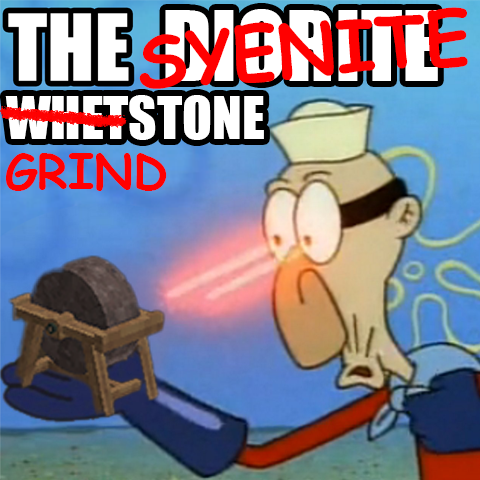
<style>
.page{position:relative;width:480px;height:480px}
.page>*{position:absolute;margin:0}
.t1{font:72px "ComicSansMS-Bold";color:#ff0000}
.t2{font:90px "Impact";color:#ffffff}
.t3{font:55px "Impact";color:#ffffff}
.t4{font:48px "ComicSansMS-Bold";color:#ff0000}
</style>
<div class="page">
<p class="t1" style="left:139px;top:7px;width:329px;height:82px;rotate:-4deg">SYENITE</p>
<p class="t2" style="left:165px;top:9px;width:273px;height:73px">DIORITE</p>
<p class="t3" style="left:5px;top:95px;width:259px;height:45px">WHETSTONE</p>
<p class="t4" style="left:5px;top:153px;width:162px;height:38px">GRIND</p>
</div>
